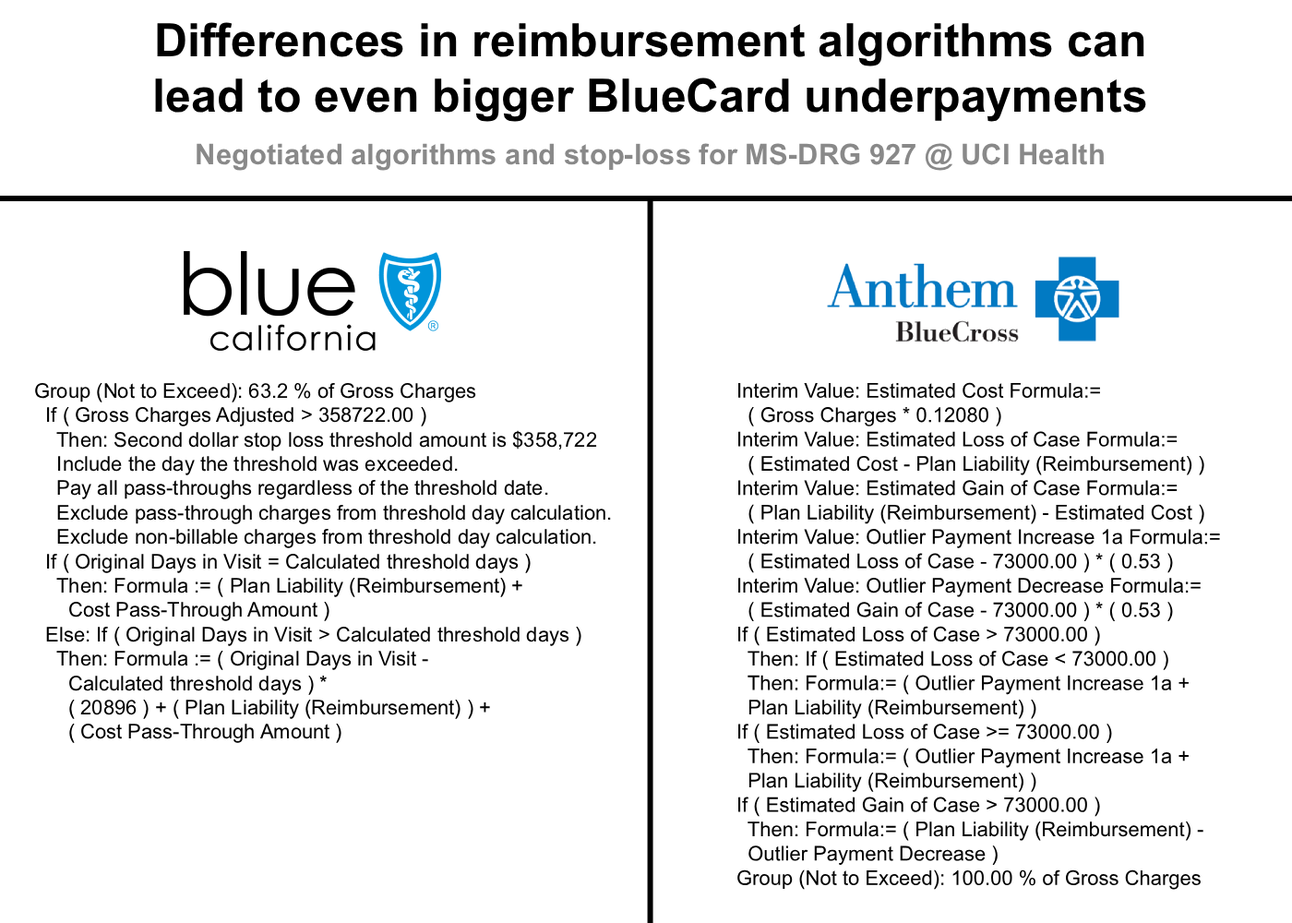
<style>
.page{position:relative;width:1292px;height:923px;background:#ffffff}
.page>*{position:absolute;margin:0}
.t1{font:46.1px "Arial-BoldMT";color:#000000}
.t2{font:28.6px "Arial-BoldMT";color:#898989}
.t3{font:20.3px "ArialMT";color:#000000}
</style>
<div class="page">
<p class="t1" style="left:155px;top:22px;width:991px;height:100px;text-align:center">Differences in reimbursement algorithms can<br>lead to even bigger BlueCard underpayments</p>
<p class="t2" style="left:197px;top:143px;width:907px;height:28px">Negotiated algorithms and stop-loss for MS-DRG 927 @ UCI Health</p>
<p class="t3" style="left:35px;top:382px;width:576px;height:361px">Group (Not to Exceed): 63.2 % of Gross Charges<br>  If ( Gross Charges Adjusted &gt; 358722.00 )<br>    Then: Second dollar stop loss threshold amount is $358,722<br>    Include the day the threshold was exceeded.<br>    Pay all pass-throughs regardless of the threshold date.<br>    Exclude pass-through charges from threshold day calculation.<br>    Exclude non-billable charges from threshold day calculation.<br>  If ( Original Days in Visit = Calculated threshold days )<br>    Then: Formula := ( Plan Liability (Reimbursement) +<br>      Cost Pass-Through Amount )<br>  Else: If ( Original Days in Visit &gt; Calculated threshold days )<br>    Then: Formula := ( Original Days in Visit -<br>      Calculated threshold days ) *<br>      ( 20896 ) + ( Plan Liability (Reimbursement) ) +<br>      ( Cost Pass-Through Amount )</p>
<p class="t3" style="left:737px;top:382px;width:483px;height:508px">Interim Value: Estimated Cost Formula:=<br>  ( Gross Charges * 0.12080 )<br>Interim Value: Estimated Loss of Case Formula:=<br>  ( Estimated Cost - Plan Liability (Reimbursement) )<br>Interim Value: Estimated Gain of Case Formula:=<br>  ( Plan Liability (Reimbursement) - Estimated Cost )<br>Interim Value: Outlier Payment Increase 1a Formula:=<br>  ( Estimated Loss of Case - 73000.00 ) * ( 0.53 )<br>Interim Value: Outlier Payment Decrease Formula:=<br>  ( Estimated Gain of Case - 73000.00 ) * ( 0.53 )<br>If ( Estimated Loss of Case &gt; 73000.00 )<br>  Then: If ( Estimated Loss of Case &lt; 73000.00 )<br>  Then: Formula:= ( Outlier Payment Increase 1a +<br>  Plan Liability (Reimbursement) )<br>If ( Estimated Loss of Case &gt;= 73000.00 )<br>  Then: Formula:= ( Outlier Payment Increase 1a +<br>  Plan Liability (Reimbursement) )<br>If ( Estimated Gain of Case &gt; 73000.00 )<br>  Then: Formula:= ( Plan Liability (Reimbursement) -<br>  Outlier Payment Decrease )<br>Group (Not to Exceed): 100.00 % of Gross Charges</p>
</div>
